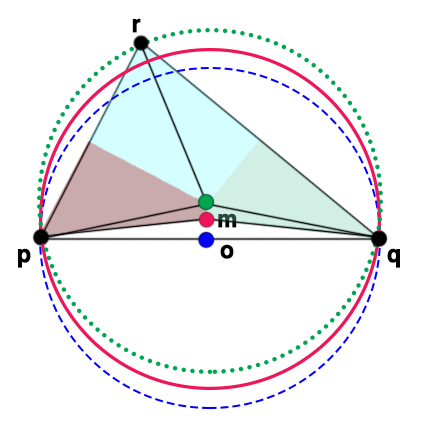
<style>
.page{position:relative;width:422px;height:440px;background:#ffffff}
.page>*{position:absolute;margin:0}
.t1{font:25px "HelveticaCE-Bold";letter-spacing:0.1em;color:#000000;font-weight:bold;scale:0.9 1}
.t2{font:25px "HelveticaCE-Bold";letter-spacing:0.1em;font-weight:bold;scale:0.9 1}
</style>
<div class="page">
<p class="t1" style="left:132px;top:18px;width:9px;height:15px">r</p>
<p class="t2" style="left:218px;top:213px;width:19px;height:15px">m</p>
<p class="t1" style="left:220px;top:244px;width:14px;height:15px">o</p>
<p class="t1" style="left:18px;top:248px;width:13px;height:20px">p</p>
<p class="t1" style="left:387px;top:248px;width:13px;height:20px">q</p>
</div>
